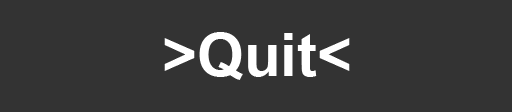
<style>
.page{position:relative;width:512px;height:112px;background:#333333}
.page>*{position:absolute;margin:0}
.t1{font:60px "Arial-BoldMT";color:#ffffff}
</style>
<div class="page">
<p class="t1" style="left:164px;top:32px;width:186px;height:48px">&gt;Quit&lt;</p>
</div>
